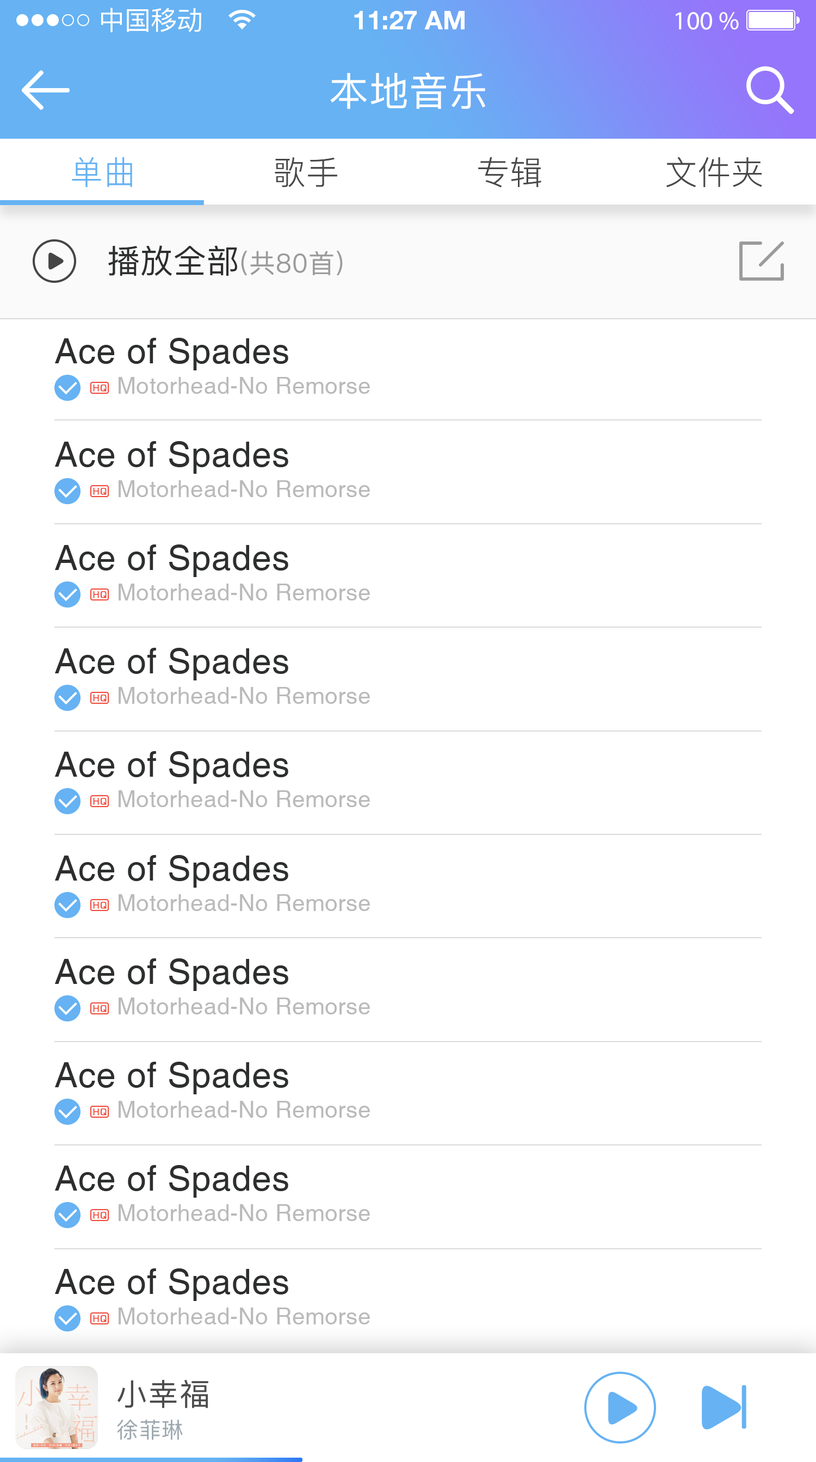
<style>
.page{position:relative;width:816px;height:1462px;background:#ffffff}
.page>*{position:absolute;margin:0}
.t1{font:26.1px "PingFang-SC-Medium";color:#ffffff}
.t2{font:26.1px "HelveticaNeueLTStd-Bd";color:#ffffff}
.t3{font:26.1px "MyriadPro-Regular";color:#ffffff}
.t4{font:39.2px "PingFang-SC-Medium";letter-spacing:0.02em;color:#fefefe}
.t5{font:32.6px "PingFang-SC-Regular";letter-spacing:0.02em;color:#66b2f3}
.t6{font:32.6px "PingFang-SC-Regular";letter-spacing:0.02em;color:#494949}
.t7{font:26.1px "PingFang-SC-Medium";letter-spacing:0.02em;color:#9b9b9b}
.t8{font:32.6px "PingFang-SC-Medium";letter-spacing:0.02em;color:#2d2f2e}
.t9{font:34.8px "Helvetica";letter-spacing:0.02em;color:#2d2f2e}
.t10{font:22.8px "Helvetica";letter-spacing:0.02em;color:#bababa}
.t11{font:8.7px "Square721BT-Roman";letter-spacing:0.02em;color:#ef4838;font-weight:bold}
.t12{font:30.5px "PingFang-SC-Medium";letter-spacing:0.04em;color:#4c4c4c}
.t13{font:21.8px "PingFang-SC-Medium";letter-spacing:0.04em;color:#9da9b0}
</style>
<div class="page">
<p class="t1" style="left:101px;top:8px;width:100px;height:25px">中国移动</p>
<p class="t2" style="left:354px;top:11px;width:110px;height:18px">11:27 AM</p>
<p class="t3" style="left:675px;top:12px;width:64px;height:18px">100 %</p>
<p class="t4" style="left:330px;top:72px;width:155px;height:37px">本地音乐</p>
<p class="t5" style="left:72px;top:157px;width:60px;height:30px">单曲</p>
<p class="t6" style="left:275px;top:157px;width:62px;height:30px">歌手</p>
<p class="t6" style="left:478px;top:157px;width:63px;height:31px">专辑</p>
<p class="t6" style="left:666px;top:157px;width:96px;height:30px">文件夹</p>
<p class="t7" style="left:108px;top:245px;width:235px;height:31px"><span class="t8">播放全部</span>(共80首)</p>
<p class="t9" style="left:55px;top:338px;width:233px;height:32px">Ace of Spades</p>
<p class="t10" style="left:119px;top:377px;width:251px;height:17px">Motorhead-No Remorse</p>
<p class="t11" style="left:93px;top:384px;width:14px;height:8px">HQ</p>
<p class="t9" style="left:55px;top:441px;width:233px;height:33px">Ace of Spades</p>
<p class="t10" style="left:119px;top:480px;width:251px;height:17px">Motorhead-No Remorse</p>
<p class="t11" style="left:93px;top:488px;width:14px;height:7px">HQ</p>
<p class="t9" style="left:55px;top:544px;width:233px;height:33px">Ace of Spades</p>
<p class="t11" style="left:93px;top:591px;width:14px;height:7px">HQ</p>
<p class="t10" style="left:119px;top:584px;width:251px;height:16px">Motorhead-No Remorse</p>
<p class="t9" style="left:55px;top:648px;width:233px;height:32px">Ace of Spades</p>
<p class="t10" style="left:119px;top:687px;width:251px;height:17px">Motorhead-No Remorse</p>
<p class="t11" style="left:93px;top:694px;width:14px;height:8px">HQ</p>
<p class="t9" style="left:55px;top:751px;width:233px;height:33px">Ace of Spades</p>
<p class="t11" style="left:93px;top:798px;width:14px;height:7px">HQ</p>
<p class="t10" style="left:119px;top:790px;width:251px;height:17px">Motorhead-No Remorse</p>
<p class="t9" style="left:55px;top:855px;width:233px;height:33px">Ace of Spades</p>
<p class="t11" style="left:93px;top:902px;width:14px;height:7px">HQ</p>
<p class="t10" style="left:119px;top:894px;width:251px;height:17px">Motorhead-No Remorse</p>
<p class="t9" style="left:55px;top:958px;width:233px;height:33px">Ace of Spades</p>
<p class="t10" style="left:119px;top:997px;width:251px;height:17px">Motorhead-No Remorse</p>
<p class="t11" style="left:93px;top:1005px;width:14px;height:7px">HQ</p>
<p class="t9" style="left:55px;top:1062px;width:233px;height:32px">Ace of Spades</p>
<p class="t11" style="left:93px;top:1108px;width:14px;height:7px">HQ</p>
<p class="t10" style="left:119px;top:1101px;width:251px;height:17px">Motorhead-No Remorse</p>
<p class="t9" style="left:55px;top:1165px;width:233px;height:32px">Ace of Spades</p>
<p class="t10" style="left:119px;top:1204px;width:251px;height:17px">Motorhead-No Remorse</p>
<p class="t11" style="left:93px;top:1212px;width:14px;height:7px">HQ</p>
<p class="t9" style="left:55px;top:1268px;width:233px;height:33px">Ace of Spades</p>
<p class="t10" style="left:119px;top:1307px;width:251px;height:17px">Motorhead-No Remorse</p>
<p class="t11" style="left:93px;top:1315px;width:14px;height:7px">HQ</p>
<p class="t12" style="left:117px;top:1380px;width:91px;height:28px">小幸福</p>
<p class="t13" style="left:117px;top:1419px;width:66px;height:20px">徐菲琳</p>
</div>
